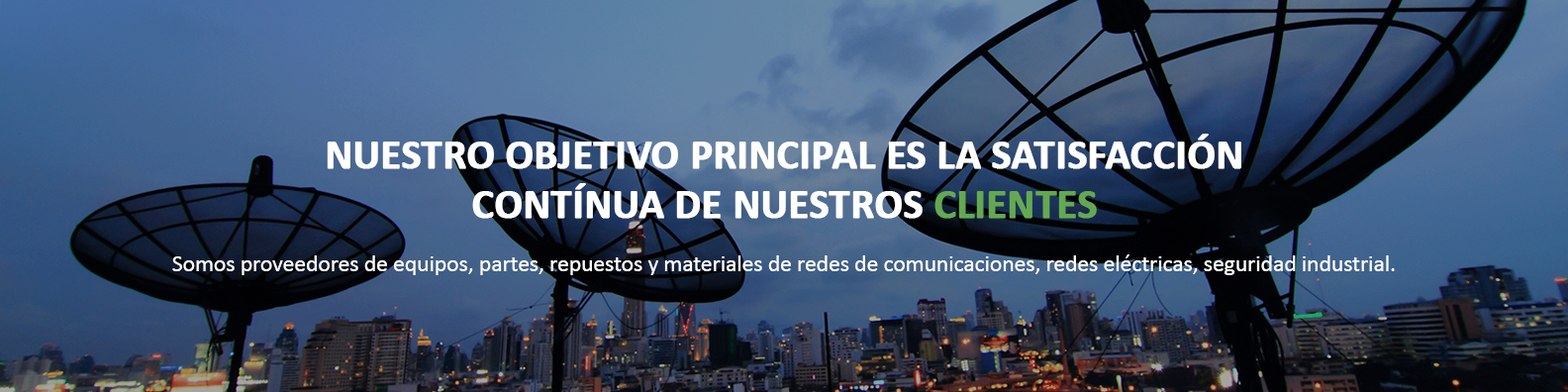
<style>
.page{position:relative;width:1568px;height:392px}
.page>*{position:absolute;margin:0}
.t1{font:41.2px "Calibri-Bold";letter-spacing:-0.005em;color:#ffffff;text-transform:uppercase;font-weight:bold}
.t2{font:41.2px "Calibri-Bold";letter-spacing:-0.005em;color:#64a951;text-transform:uppercase;font-weight:bold}
.t3{font:23.5px "Calibri";letter-spacing:-0.005em;color:#ffffff}
</style>
<div class="page">
<p class="t1" style="left:327px;top:134px;width:914px;height:85px;text-align:center">NUESTRO OBJETIVO PRINCIPAL ES LA SATISFACCIÓN<br>CONTÍNUA DE NUESTROS <span class="t2">CLIENTES</span></p>
<p class="t3" style="left:172px;top:254px;width:1223px;height:21px">Somos proveedores de equipos, partes, repuestos y materiales de redes de comunicaciones, redes eléctricas, seguridad industrial.</p>
</div>
